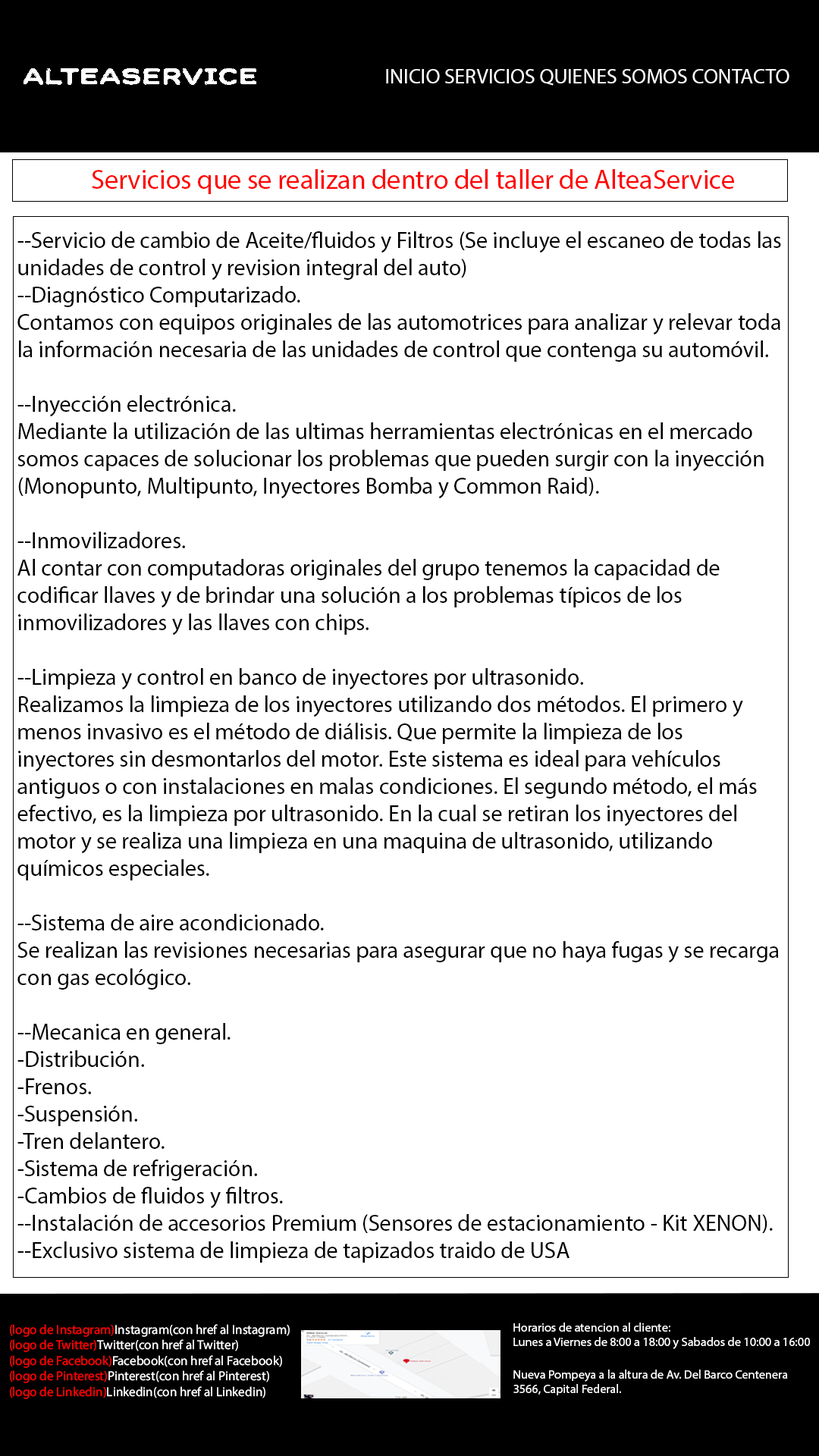
<style>
.page{position:relative;width:819px;height:1456px;background:#ffffff}
.page>*{position:absolute;margin:0}
.t1{font:20.9px "MyriadPro-Regular";color:#ffffff}
.t2{font:27.3px "MyriadPro-Regular";color:#ff0000}
.t3{font:22.7px "MyriadPro-Regular";color:#000000}
.t4{font:13px "MyriadPro-Regular";color:#ffffff}
.t5{font:13px "MyriadPro-Regular";color:#ff0000}
.t6{font:12.3px "MyriadPro-Regular";color:#ffffff}
</style>
<div class="page">
<p class="t1" style="left:386px;top:69px;width:403px;height:17px">INICIO SERVICIOS QUIENES SOMOS CONTACTO</p>
<p class="t2" style="left:92px;top:169px;width:642px;height:25px">Servicios que se realizan dentro del taller de AlteaService</p>
<p class="t3" style="left:17px;top:231px;width:764px;height:1032px">--Servicio de cambio de Aceite/fluidos y Filtros (Se incluye el escaneo de todas las unidades de control y revision integral del auto)<br>--Diagnóstico Computarizado.<br>Contamos con equipos originales de las automotrices para analizar y relevar toda la información necesaria de las unidades de control que contenga su automóvil.<br><br>--Inyección electrónica.<br>Mediante la utilización de las ultimas herramientas electrónicas en el mercado somos capaces de solucionar los problemas que pueden surgir con la inyección (Monopunto, Multipunto, Inyectores Bomba y Common Raid).<br><br>--Inmovilizadores.<br>Al contar con computadoras originales del grupo tenemos la capacidad de codificar llaves y de brindar una solución a los problemas típicos de los inmovilizadores y las llaves con chips.<br><br>--Limpieza y control en banco de inyectores por ultrasonido.<br>Realizamos la limpieza de los inyectores utilizando dos métodos. El primero y menos invasivo es el método de diálisis. Que permite la limpieza de los inyectores sin desmontarlos del motor. Este sistema es ideal para vehículos antiguos o con instalaciones en malas condiciones. El segundo método, el más efectivo, es la limpieza por ultrasonido. En la cual se retiran los inyectores del motor y se realiza una limpieza en una maquina de ultrasonido, utilizando químicos especiales.<br><br>--Sistema de aire acondicionado.<br>Se realizan las revisiones necesarias para asegurar que no haya fugas y se recarga con gas ecológico.<br><br>--Mecanica en general.<br>-Distribución.<br>-Frenos.<br>-Suspensión.<br>-Tren delantero.<br>-Sistema de refrigeración.<br>-Cambios de fluidos y filtros.<br>--Instalación de accesorios Premium (Sensores de estacionamiento - Kit XENON).<br>--Exclusivo sistema de limpieza de tapizados traido de USA</p>
<p class="t4" style="left:10px;top:1324px;width:280px;height:75px"><span class="t5">(logo de Instagram)</span>Instagram(con href al Instagram)<br><span class="t5">(logo de Twitter)</span>Twitter(con href al Twitter)<br><span class="t5">(logo de Facebook)</span>Facebook(con href al Facebook)<br><span class="t5">(logo de Pinterest)</span>Pinterest(con href al Pinterest)<br><span class="t5">(logo de Linkedin)</span>Linkedin(con href al Linkedin)</p>
<p class="t6" style="left:513px;top:1323px;width:297px;height:26px">Horarios de atencion al cliente:<br>Lunes a Viernes de 8:00 a 18:00 y Sabados de 10:00 a 16:00</p>
<p class="t6" style="left:513px;top:1370px;width:275px;height:25px">Nueva Pompeya a la altura de Av. Del Barco Centenera 3566, Capital Federal.</p>
</div>
